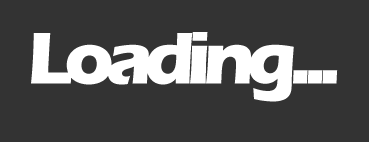
<style>
.page{position:relative;width:369px;height:142px;background:#333333}
.page>*{position:absolute;margin:0}
.t1{font:130px "ErasITC-Bold";letter-spacing:-0.1em;color:#ffffff}
</style>
<div class="page">
<p class="t1" style="left:31px;top:32px;width:307px;height:70px">Loading...</p>
</div>
